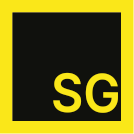
<style>
.page{position:relative;width:134px;height:134px;background:#10110d}
.page>*{position:absolute;margin:0}
.t1{font:52.8px "Inter-SemiBold";color:#fae719;scale:0.94 1}
</style>
<div class="page">
<p class="t1" style="left:52px;top:72px;width:67px;height:42px;rotate:1deg">SG</p>
</div>
